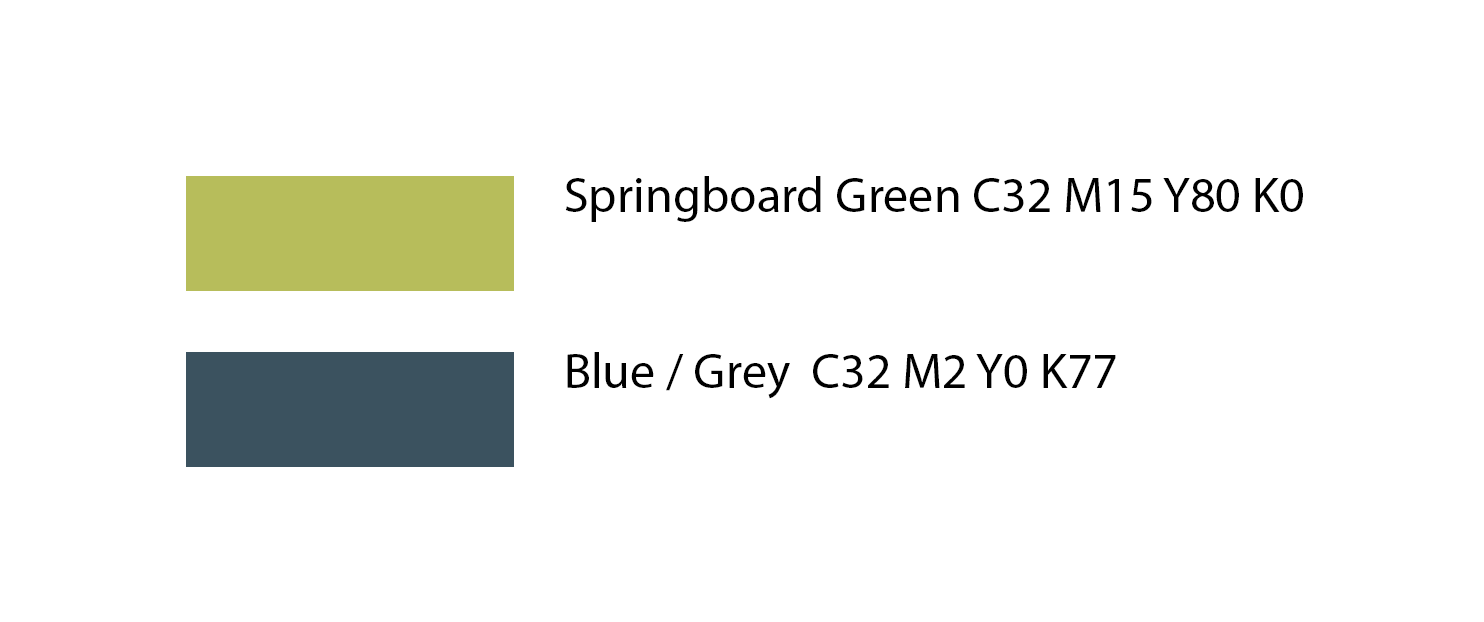
<style>
.page{position:relative;width:1484px;height:622px;background:#ffffff}
.page>*{position:absolute;margin:0}
.t1{font:50px "MyriadPro-Regular";color:#000000}
</style>
<div class="page">
<p class="t1" style="left:565px;top:176px;width:738px;height:46px">Springboard Green C32 M15 Y80 K0</p>
<p class="t1" style="left:567px;top:352px;width:549px;height:47px">Blue / Grey  C32 M2 Y0 K77</p>
</div>
